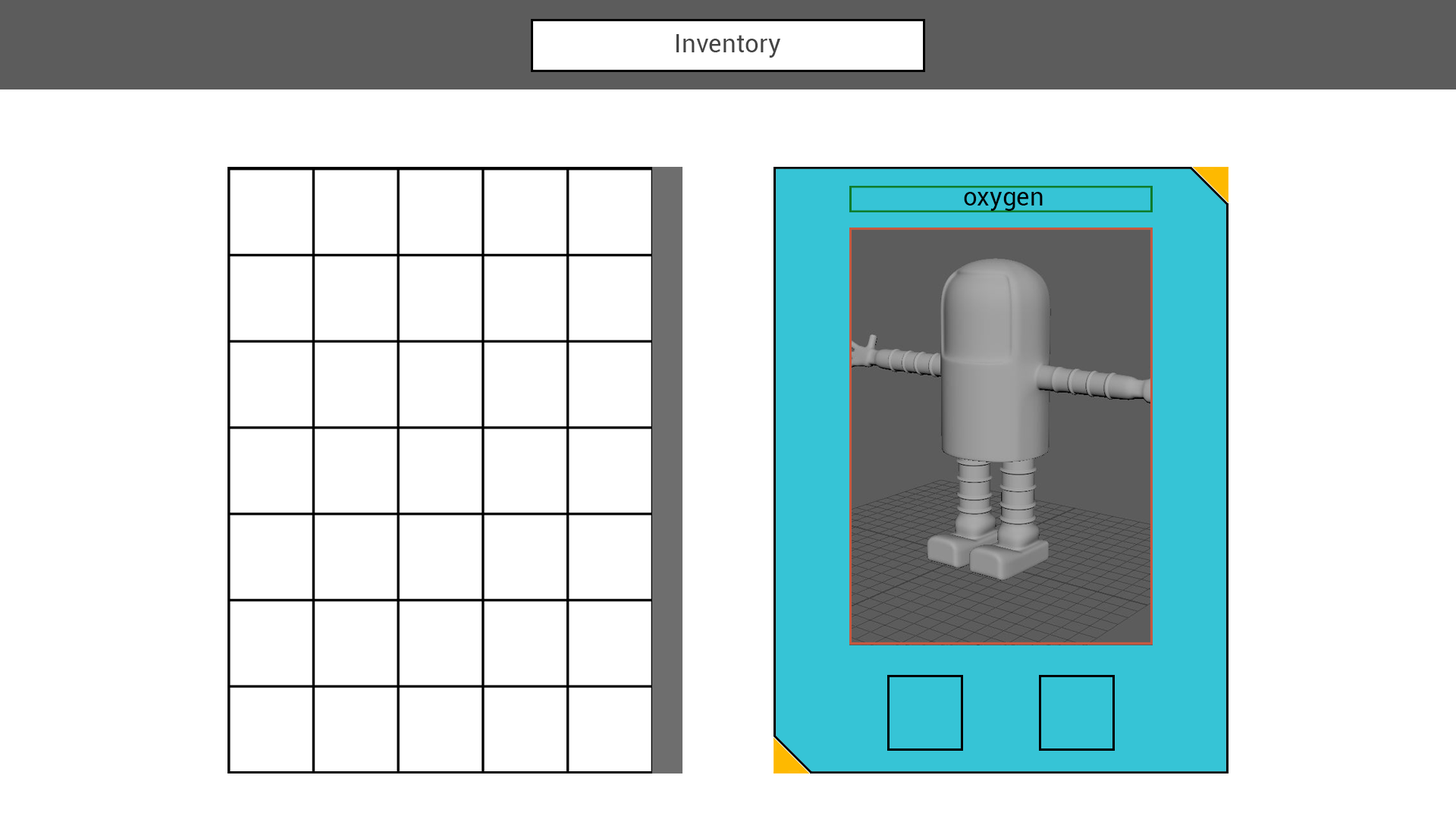
<style>
.page{position:relative;width:1456px;height:819px;background:#ffffff}
.page>*{position:absolute;margin:0}
.t1{font:25.3px "Roboto-Regular";color:#444444}
.t2{font:25.3px "Roboto-Regular";color:#000000}
</style>
<div class="page">
<p class="t1" style="left:676px;top:34px;width:104px;height:24px">Inventory</p>
<p class="t2" style="left:964px;top:192px;width:79px;height:19px">oxygen</p>
</div>
